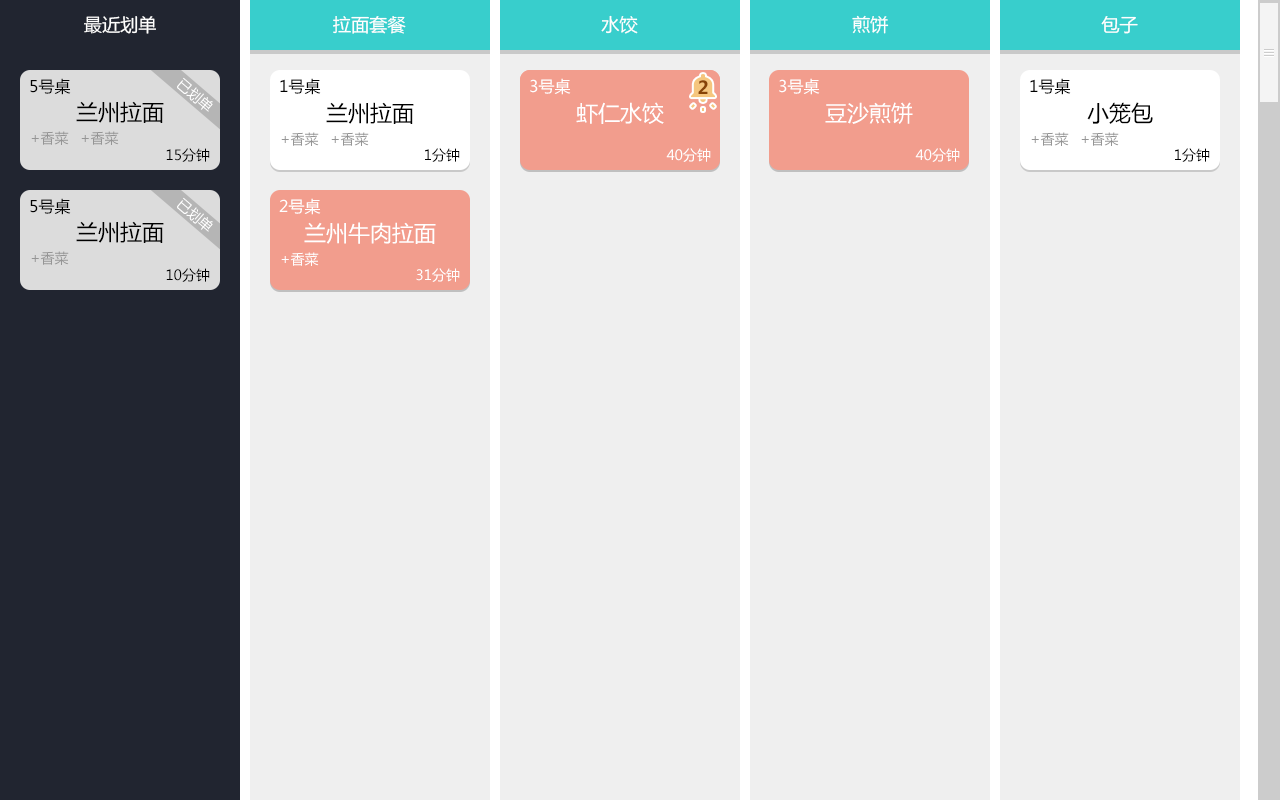
<style>
.page{position:relative;width:1280px;height:800px;background:#efefef}
.page>*{position:absolute;margin:0}
.t1{font:18px "MicrosoftYaHei";color:#ffffff}
.t2{font:16px "MicrosoftYaHei";color:#000000}
.t3{font:16px "MicrosoftYaHei";color:#ffffff}
.t4{font:18px "MicrosoftYaHei-Bold";color:#874306}
.t5{font:22px "MicrosoftYaHei";color:#000000}
.t6{font:22px "MicrosoftYaHei";color:#ffffff}
.t7{font:14px "MicrosoftYaHei";color:#959595}
.t8{font:14px "MicrosoftYaHei";color:#000000}
.t9{font:14px "MicrosoftYaHei";color:#ffffff}
</style>
<div class="page">
<p class="t1" style="left:84px;top:16px;width:72px;height:18px">最近划单</p>
<p class="t1" style="left:333px;top:16px;width:73px;height:18px">拉面套餐</p>
<p class="t1" style="left:601px;top:15px;width:37px;height:19px">水饺</p>
<p class="t1" style="left:852px;top:15px;width:37px;height:19px">煎饼</p>
<p class="t1" style="left:1101px;top:16px;width:37px;height:18px">包子</p>
<p class="t2" style="left:30px;top:78px;width:41px;height:17px">5号桌</p>
<p class="t2" style="left:280px;top:78px;width:41px;height:17px">1号桌</p>
<p class="t3" style="left:530px;top:78px;width:41px;height:17px">3号桌</p>
<p class="t3" style="left:779px;top:78px;width:41px;height:17px">3号桌</p>
<p class="t2" style="left:1030px;top:78px;width:41px;height:17px">1号桌</p>
<p class="t4" style="left:698px;top:80px;width:10px;height:14px">2</p>
<p class="t5" style="left:76px;top:101px;width:88px;height:22px">兰州拉面</p>
<p class="t5" style="left:326px;top:102px;width:88px;height:22px">兰州拉面</p>
<p class="t6" style="left:576px;top:102px;width:88px;height:22px">虾仁水饺</p>
<p class="t6" style="left:825px;top:102px;width:88px;height:22px">豆沙煎饼</p>
<p class="t5" style="left:1087px;top:102px;width:66px;height:22px">小笼包</p>
<p class="t7" style="left:31px;top:131px;width:38px;height:14px">+香菜</p>
<p class="t7" style="left:81px;top:131px;width:38px;height:14px">+香菜</p>
<p class="t7" style="left:281px;top:132px;width:38px;height:14px">+香菜</p>
<p class="t7" style="left:331px;top:132px;width:38px;height:14px">+香菜</p>
<p class="t7" style="left:1031px;top:132px;width:38px;height:14px">+香菜</p>
<p class="t7" style="left:1081px;top:132px;width:38px;height:14px">+香菜</p>
<p class="t8" style="left:166px;top:148px;width:44px;height:14px">15分钟</p>
<p class="t8" style="left:425px;top:148px;width:35px;height:14px">1分钟</p>
<p class="t9" style="left:666px;top:148px;width:45px;height:14px">40分钟</p>
<p class="t9" style="left:915px;top:148px;width:45px;height:14px">40分钟</p>
<p class="t8" style="left:1175px;top:148px;width:35px;height:14px">1分钟</p>
<p class="t2" style="left:30px;top:198px;width:41px;height:17px">5号桌</p>
<p class="t3" style="left:279px;top:198px;width:42px;height:17px">2号桌</p>
<p class="t5" style="left:76px;top:221px;width:88px;height:22px">兰州拉面</p>
<p class="t6" style="left:304px;top:222px;width:132px;height:22px">兰州牛肉拉面</p>
<p class="t7" style="left:31px;top:251px;width:38px;height:14px">+香菜</p>
<p class="t9" style="left:281px;top:252px;width:38px;height:14px">+香菜</p>
<p class="t8" style="left:166px;top:268px;width:44px;height:14px">10分钟</p>
<p class="t9" style="left:416px;top:268px;width:44px;height:14px">31分钟</p>
</div>
